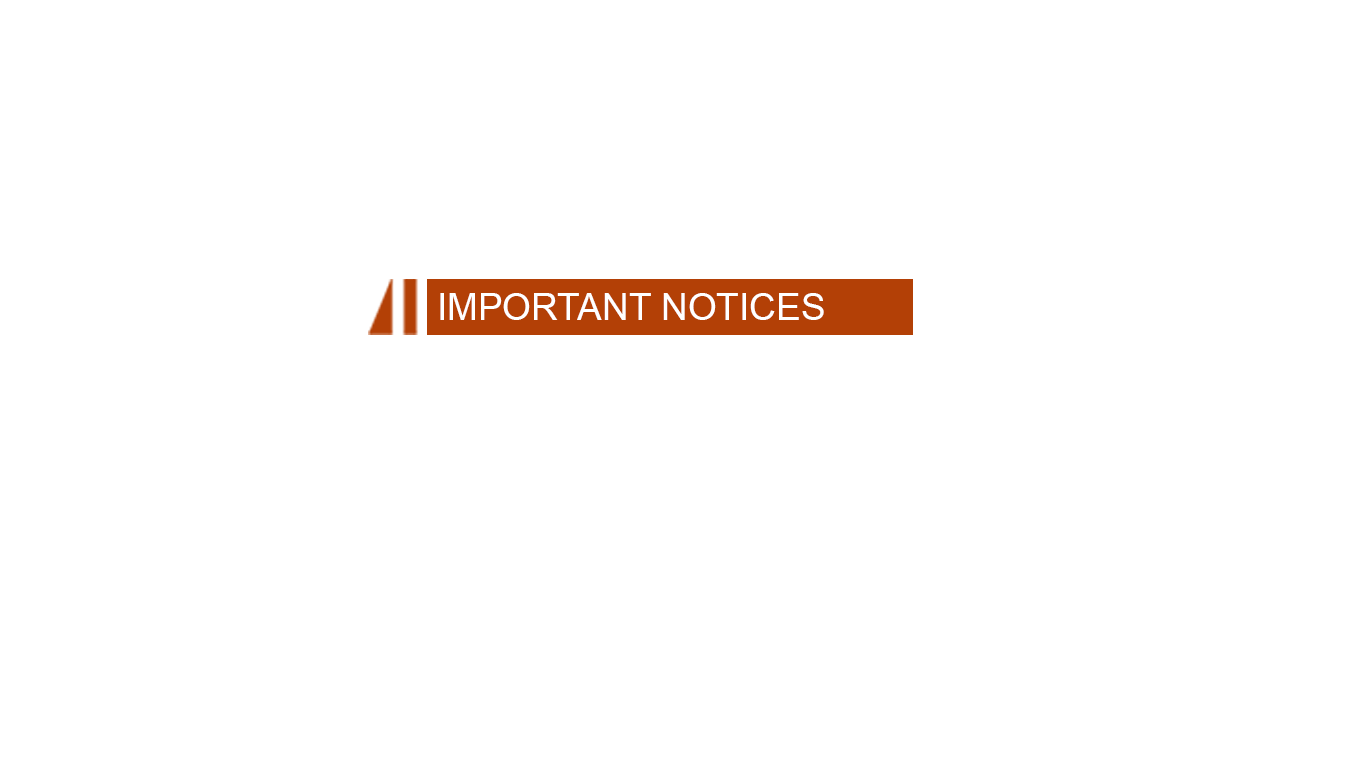
<style>
.page{position:relative;width:1366px;height:768px;background:#ffffff}
.page>*{position:absolute;margin:0}
.t1{font:37px "ArialMT";color:#ffffff}
</style>
<div class="page">
<p class="t1" style="left:440px;top:293px;width:384px;height:27px">IMPORTANT NOTICES</p>
</div>
